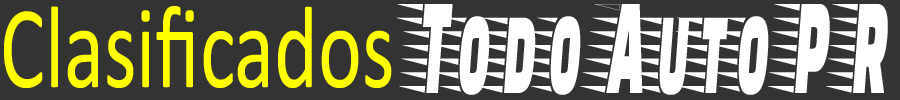
<style>
.page{position:relative;width:900px;height:100px;background:#333333}
.page>*{position:absolute;margin:0}
.t1{font:118.4px "Calibri";color:#ffff00;scale:0.7 1}
.t2{font:142.2px "FasterOne-Regular";color:#ffffff;scale:0.42 1}
</style>
<div class="page">
<p class="t1" style="left:4px;top:6px;width:388px;height:82px">Clasificados</p>
<p class="t2" style="left:396px;top:4px;width:492px;height:91px">Todo Auto P R</p>
</div>
